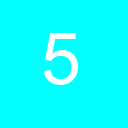
<style>
.page{position:relative;width:128px;height:128px;background:#00ffff}
.page>*{position:absolute;margin:0}
.t1{font:72px "ArialMT";color:#ffffff}
</style>
<div class="page">
<p class="t1" style="left:44px;top:33px;width:35px;height:52px">5</p>
</div>
